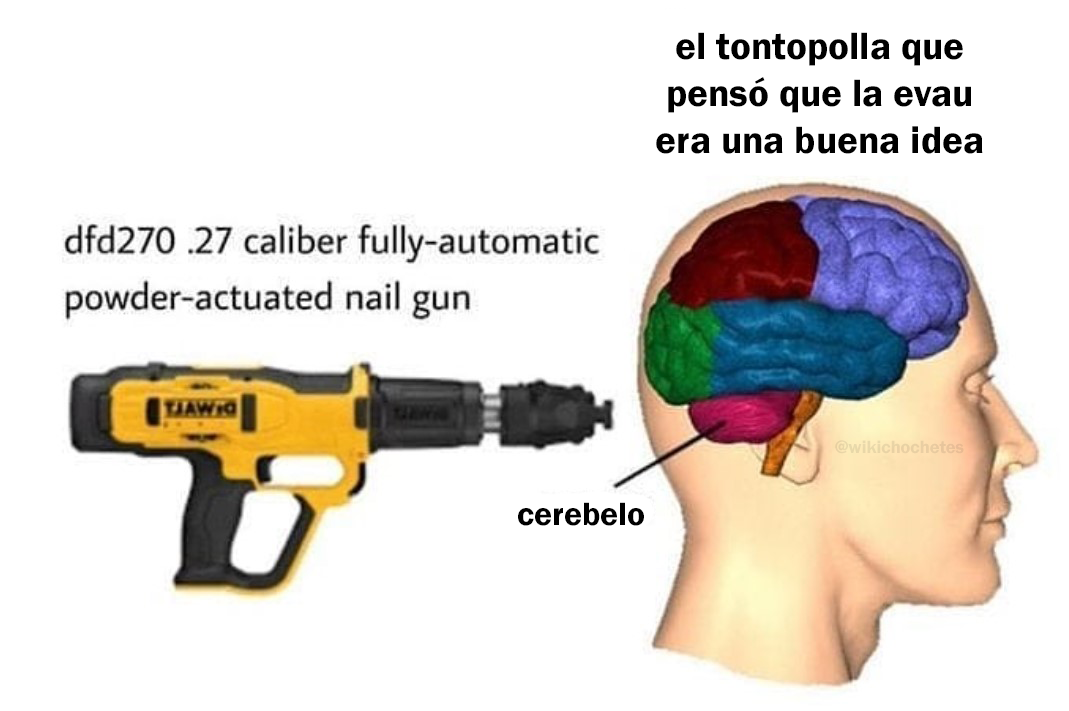
<style>
.page{position:relative;width:1069px;height:711px;background:#ffffff}
.page>*{position:absolute;margin:0}
.t1{font:39.2px "FranklinGothic-Demi";color:#000000}
.t2{font:18.2px "FranklinGothic-Demi";color:#e9d0a4}
.t3{font:33.5px "FranklinGothic-Demi";color:#000000}
</style>
<div class="page">
<p class="t1" style="left:656px;top:32px;width:327px;height:122px;text-align:center">el tontopolla que<br>pensó que la evau<br>era una buena idea</p>
<p class="t2" style="left:835px;top:440px;width:129px;height:14px">@wikichochetes</p>
<p class="t3" style="left:518px;top:502px;width:126px;height:24px">cerebelo</p>
</div>
